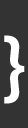
<style>
.page{position:relative;width:28px;height:128px;background:#333333}
.page>*{position:absolute;margin:0}
.t1{font:75px "AdobeGothicStd-Bold";color:#ffffff}
</style>
<div class="page">
<p class="t1" style="left:4px;top:35px;width:21px;height:69px">{</p>
</div>
